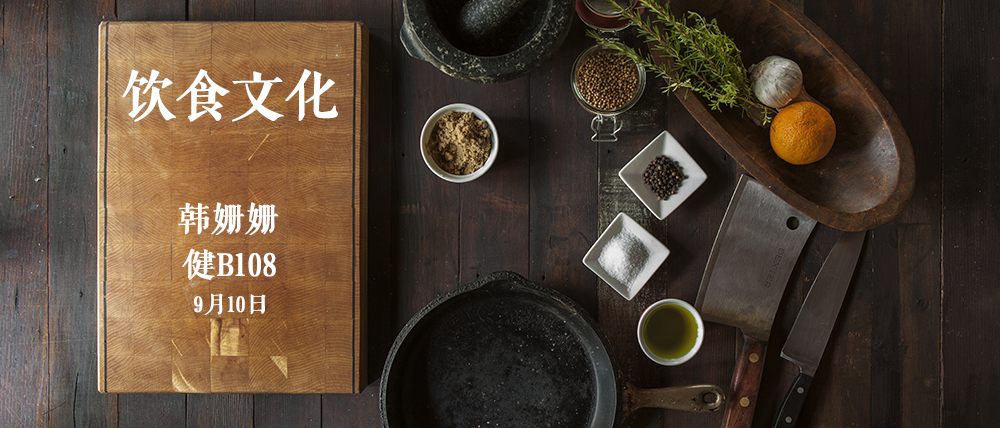
<style>
.page{position:relative;width:1000px;height:428px}
.page>*{position:absolute;margin:0}
.t1{font:52.8px "FZQKBYSJW--GB1-0";color:#ffffff;font-weight:bold}
.t2{font:32.9px "FZQKBYSJW--GB1-0";color:#ffffff;font-weight:bold}
.t3{font:22.5px "FZQKBYSJW--GB1-0";color:#ffffff;font-weight:bold}
</style>
<div class="page">
<p class="t1" style="left:122px;top:69px;width:216px;height:53px">饮食文化</p>
<p class="t2" style="left:178px;top:202px;width:101px;height:33px">韩姗姗</p>
<p class="t2" style="left:182px;top:248px;width:94px;height:32px">健B108</p>
<p class="t3" style="left:194px;top:293px;width:72px;height:22px">9月10日</p>
</div>
